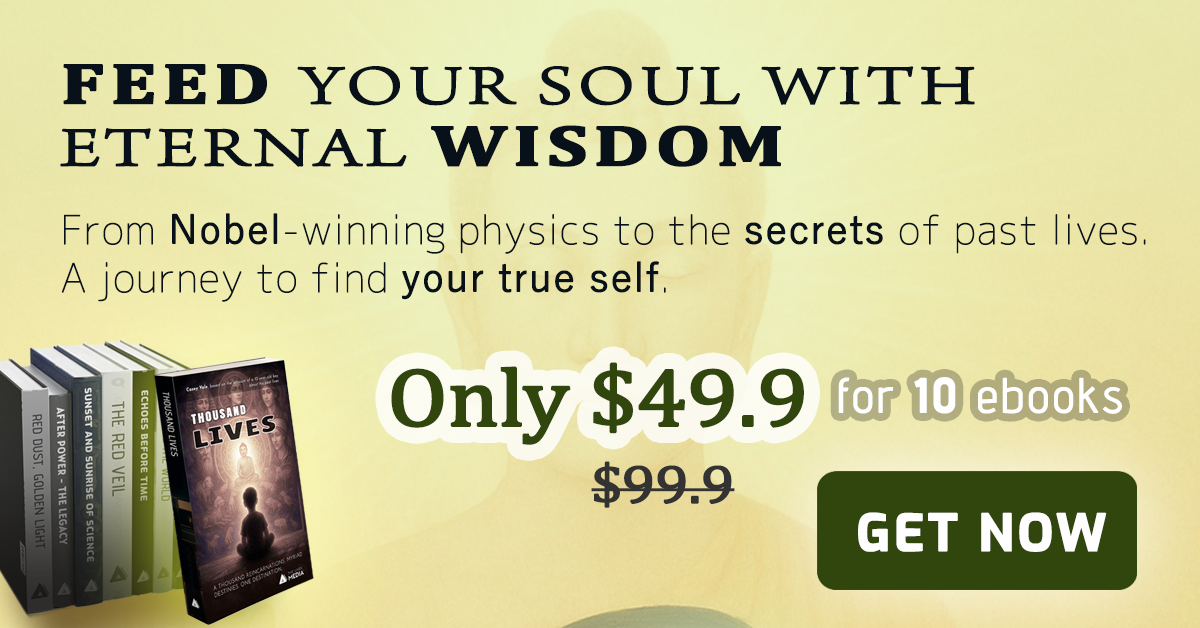
<style>
.page{position:relative;width:1200px;height:628px}
.page>*{position:absolute;margin:0}
.t1{font:57.6px/62px "ArnoPro-LightDisplay";letter-spacing:0.05em;color:#08101a;font-weight:bold;scale:1.38 1}
.t2{font:57.6px/62px "Cambria-Bold";letter-spacing:0.05em;color:#08101a;font-weight:bold;scale:1.38 1}
.t3{font:39.6px/48px "Chogokuboso-Gothic";letter-spacing:0.005em;color:#08101a;font-weight:bold}
.t4{font:39.6px/48px "YuGothic-Regular";letter-spacing:0.005em;color:#08101a;font-weight:bold}
.t5{font:82.8px "Cambria";letter-spacing:-0.025em;color:#31460c;font-weight:bold;scale:1.11 1}
.t6{font:54px "Cambria";letter-spacing:-0.025em;color:#31460c;font-weight:bold;scale:1.11 1}
.t7{font:48px "AdventPro-Regular";letter-spacing:0.05em;color:#ffffff;font-weight:bold}
.t8{font:48px "AdventPro-Bold";letter-spacing:0.05em;color:#ffffff;font-weight:bold}
.t9{font:54px "Cambria";letter-spacing:-0.025em;color:#333333;font-weight:bold;scale:1.11 1}
.t10{font:50.3px "Exo-Bold";letter-spacing:0.05em;color:#fefefe;font-weight:bold}
</style>
<div class="page">
<p class="t1" style="left:60px;top:64px;width:915px;height:103px"><span class="t2">FEED </span>YOUR SOUL WITH ETERNAL <span class="t2">WISDOM</span></p>
<p class="t3" style="left:61px;top:213px;width:1085px;height:89px">From <span class="t4">Nobel</span>-winning physics to the <span class="t4">secrets </span>of past lives. <br>A journey to find <span class="t4">your true self</span>.</p>
<p class="t5" style="left:391px;top:362px;width:413px;height:83px"><span class="t6"><br></span>Only $49.9</p>
<p class="t7" style="left:838px;top:377px;width:284px;height:37px">for <span class="t8">10</span> ebooks</p>
<p class="t9" style="left:591px;top:461px;width:144px;height:47px">$99.9</p>
<p class="t10" style="left:858px;top:512px;width:249px;height:40px">GET NOW</p>
</div>
